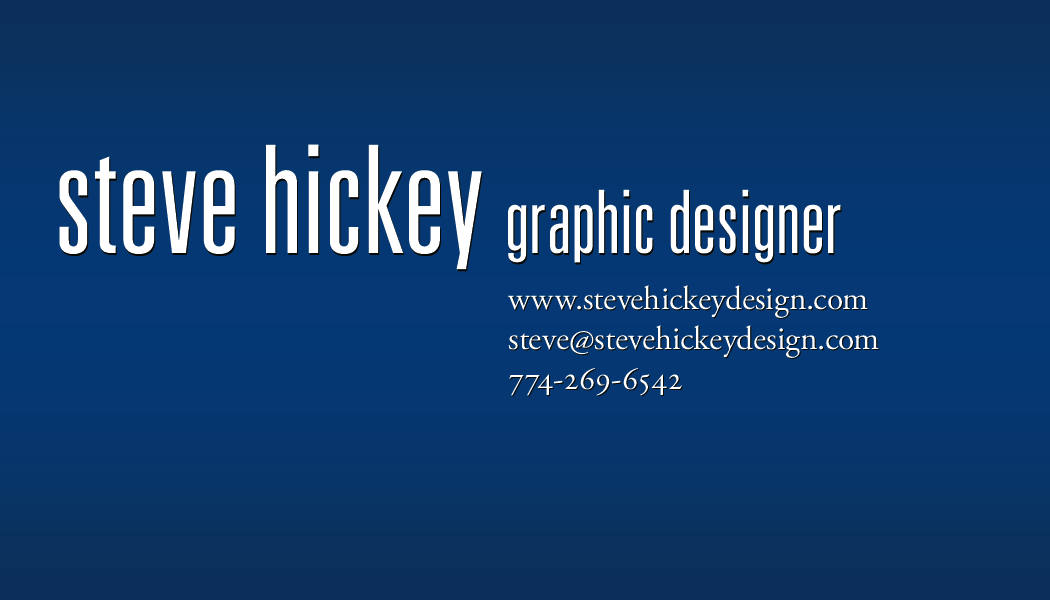
<style>
.page{position:relative;width:1050px;height:600px}
.page>*{position:absolute;margin:0}
.t1{font:87.5px "Univers-LightUltraCondensed";color:#ffffff}
.t2{font:150px "Univers-LightUltraCondensed";color:#ffffff}
.t3{font:33.3px "AGaramondPro-Regular";color:#ffffff}
.t4{font:33.3px "AGaramondPro-Regular";color:#ffffff;font-variant:small-caps}
</style>
<div class="page">
<p class="t1" style="left:59px;top:144px;width:782px;height:126px"><span class="t2">steve hickey </span>graphic designer</p>
<p class="t3" style="left:507px;top:285px;width:372px;height:111px">www.stevehickeydesign.com<br>steve@stevehickeydesign.com<br><span class="t4">774-269-6542</span></p>
</div>
